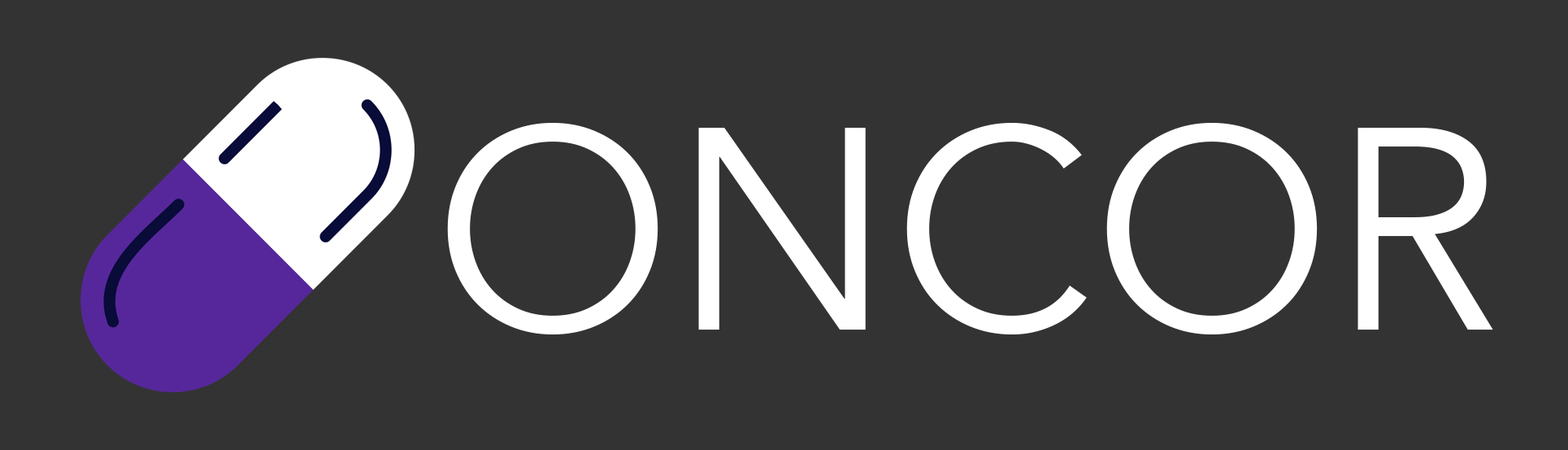
<style>
.page{position:relative;width:1568px;height:450px;background:#333333}
.page>*{position:absolute;margin:0}
.t1{font:284.5px "Avenir-Book";color:#ffffff}
</style>
<div class="page">
<p class="t1" style="left:447px;top:123px;width:1046px;height:211px">ONCOR</p>
</div>
